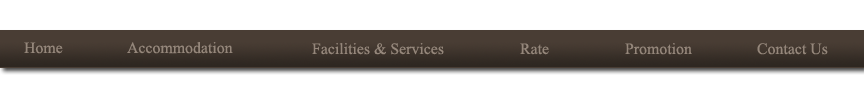
<style>
.page{position:relative;width:864px;height:100px;background:#ffffff}
.page>*{position:absolute;margin:0}
.t1{font:24px "AngsanaNew";color:#95877b}
</style>
<div class="page">
<p class="t1" style="left:24px;top:42px;width:39px;height:12px">Home</p>
<p class="t1" style="left:127px;top:42px;width:106px;height:12px">Accommodation</p>
<p class="t1" style="left:312px;top:43px;width:132px;height:12px">Facilities &amp; Services</p>
<p class="t1" style="left:520px;top:43px;width:29px;height:12px">Rate</p>
<p class="t1" style="left:625px;top:43px;width:67px;height:12px">Promotion</p>
<p class="t1" style="left:757px;top:43px;width:71px;height:12px">Contact Us</p>
</div>
